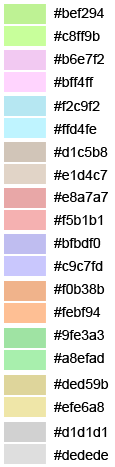
<style>
.page{position:relative;width:115px;height:467px;background:#ffffff}
.page>*{position:absolute;margin:0}
.t1{font:14px "ArialMT";color:#000000}
</style>
<div class="page">
<p class="t1" style="left:54px;top:8px;width:50px;height:10px">#bef294</p>
<p class="t1" style="left:54px;top:31px;width:46px;height:10px">#c8ff9b</p>
<p class="t1" style="left:54px;top:54px;width:50px;height:10px">#b6e7f2</p>
<p class="t1" style="left:54px;top:77px;width:40px;height:10px">#bff4ff</p>
<p class="t1" style="left:54px;top:101px;width:46px;height:10px">#f2c9f2</p>
<p class="t1" style="left:54px;top:124px;width:43px;height:10px">#ffd4fe</p>
<p class="t1" style="left:54px;top:147px;width:54px;height:10px">#d1c5b8</p>
<p class="t1" style="left:54px;top:170px;width:54px;height:10px">#e1d4c7</p>
<p class="t1" style="left:54px;top:192px;width:54px;height:10px">#e8a7a7</p>
<p class="t1" style="left:54px;top:215px;width:49px;height:10px">#f5b1b1</p>
<p class="t1" style="left:54px;top:238px;width:47px;height:10px">#bfbdf0</p>
<p class="t1" style="left:54px;top:261px;width:49px;height:10px">#c9c7fd</p>
<p class="t1" style="left:54px;top:284px;width:51px;height:10px">#f0b38b</p>
<p class="t1" style="left:54px;top:307px;width:47px;height:10px">#febf94</p>
<p class="t1" style="left:54px;top:330px;width:50px;height:10px">#9fe3a3</p>
<p class="t1" style="left:54px;top:353px;width:50px;height:10px">#a8efad</p>
<p class="t1" style="left:54px;top:379px;width:55px;height:10px">#ded59b</p>
<p class="t1" style="left:54px;top:402px;width:50px;height:10px">#efe6a8</p>
<p class="t1" style="left:54px;top:427px;width:53px;height:10px">#d1d1d1</p>
<p class="t1" style="left:54px;top:450px;width:54px;height:10px">#dedede</p>
</div>
